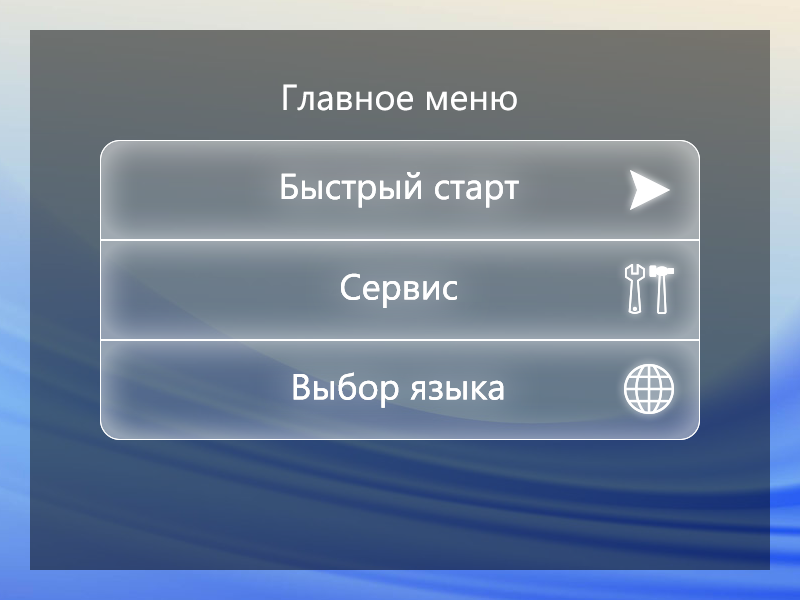
<style>
.page{position:relative;width:800px;height:600px}
.page>*{position:absolute;margin:0}
.t1{font:36px "SegoeUI";color:#ffffff}
</style>
<div class="page">
<p class="t1" style="left:283px;top:84px;width:234px;height:27px">Главное меню</p>
<p class="t1" style="left:281px;top:172px;width:238px;height:36px">Быстрый старт</p>
<p class="t1" style="left:281px;top:172px;width:238px;height:36px">Быстрый старт</p>
<p class="t1" style="left:341px;top:273px;width:116px;height:35px">Сервис</p>
<p class="t1" style="left:341px;top:273px;width:116px;height:35px">Сервис</p>
<p class="t1" style="left:293px;top:372px;width:211px;height:36px">Выбор языка</p>
<p class="t1" style="left:293px;top:372px;width:211px;height:36px">Выбор языка</p>
</div>
